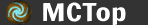
<style>
.page{position:relative;width:148px;height:25px;background:#333333}
.page>*{position:absolute;margin:0}
.t1{font:24px "FrancoisOne-Regular";color:#ffffff;scale:1.3 1}
</style>
<div class="page">
<p class="t1" style="left:43px;top:2px;width:83px;height:24px">MCTop</p>
</div>
